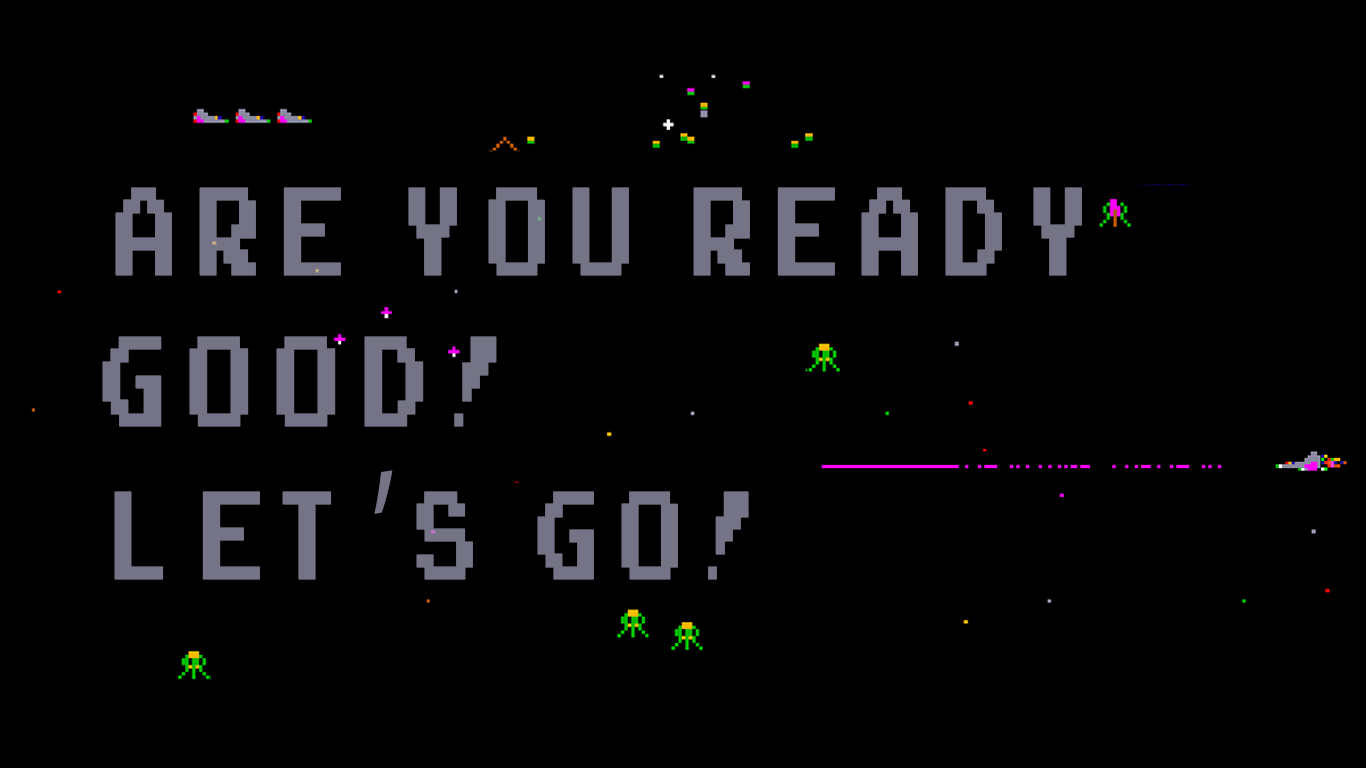
<style>
.page{position:relative;width:1366px;height:768px;background:#000000}
.page>*{position:absolute;margin:0}
.t1{font:173.1px "ArcadeClassic";letter-spacing:0.18em;color:#747486;font-weight:bold;scale:0.64 1}
.t2{font:180.1px "ArcadeClassic";letter-spacing:0.18em;color:#747486;font-weight:bold;scale:0.64 1}
.t3{font:173.1px "MyriadPro-Regular";letter-spacing:0.18em;color:#747486;font-weight:bold;scale:0.64 1}
</style>
<div class="page">
<p class="t1" style="left:115px;top:187px;width:967px;height:89px">ARE YOU READY</p>
<p class="t2" style="left:102px;top:336px;width:395px;height:91px">GOOD!</p>
<p class="t1" style="left:114px;top:470px;width:635px;height:110px">LET<span class="t3">’</span>S GO!</p>
</div>
